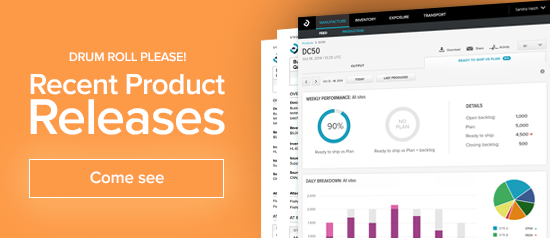
<style>
.page{position:relative;width:550px;height:238px;background:#ffffff}
.page>*{position:absolute;margin:0}
.t1{font:12.7px "ProximaNova-Semibold";letter-spacing:-0.022em;color:#ffffff}
.t2{font:29.9px "ProximaNova-Semibold";letter-spacing:-0.022em;color:#ffffff}
.t3{font:52px "ProximaNova-Semibold";letter-spacing:-0.022em;color:#ffffff}
.t4{font:17px "ProximaNova-Semibold";letter-spacing:-0.012em;color:#ffffff}
</style>
<div class="page">
<p class="t1" style="left:69px;top:52px;width:117px;height:10px">DRUM ROLL PLEASE!</p>
<p class="t2" style="left:30px;top:74px;width:195px;height:21px">Recent Product</p>
<p class="t3" style="left:30px;top:99px;width:195px;height:36px">Releases</p>
<p class="t4" style="left:90px;top:171px;width:74px;height:13px">Come see</p>
</div>
